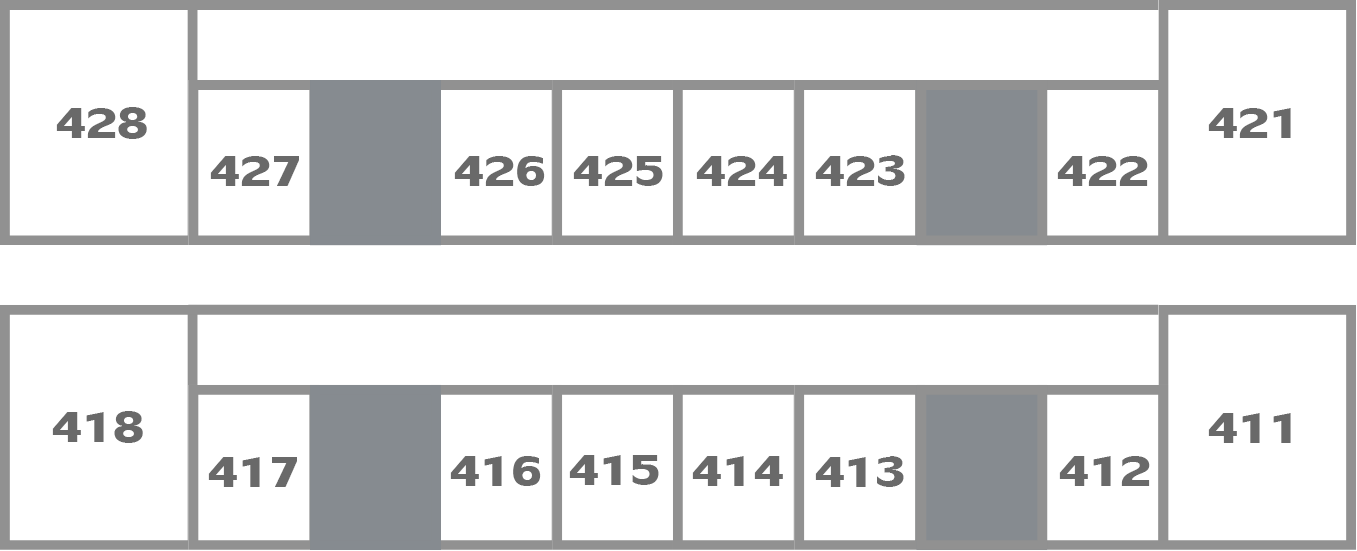
<style>
.page{position:relative;width:1357px;height:551px;background:#ffffff}
.page>*{position:absolute;margin:0}
.t1{font:64.2px "LilyUPCBold";color:#696969}
</style>
<div class="page">
<p class="t1" style="left:56px;top:107px;width:91px;height:32px">428</p>
<p class="t1" style="left:1208px;top:108px;width:83px;height:30px">421</p>
<p class="t1" style="left:210px;top:156px;width:89px;height:30px">427</p>
<p class="t1" style="left:454px;top:156px;width:91px;height:30px">426</p>
<p class="t1" style="left:573px;top:156px;width:90px;height:30px">425</p>
<p class="t1" style="left:696px;top:156px;width:91px;height:30px">424</p>
<p class="t1" style="left:815px;top:155px;width:90px;height:31px">423</p>
<p class="t1" style="left:1057px;top:156px;width:91px;height:30px">422</p>
<p class="t1" style="left:52px;top:411px;width:91px;height:32px">418</p>
<p class="t1" style="left:1208px;top:413px;width:83px;height:30px">411</p>
<p class="t1" style="left:208px;top:457px;width:89px;height:30px">417</p>
<p class="t1" style="left:450px;top:456px;width:91px;height:30px">416</p>
<p class="t1" style="left:569px;top:455px;width:90px;height:30px">415</p>
<p class="t1" style="left:692px;top:456px;width:91px;height:30px">414</p>
<p class="t1" style="left:815px;top:456px;width:89px;height:31px">413</p>
<p class="t1" style="left:1059px;top:456px;width:91px;height:30px">412</p>
</div>
